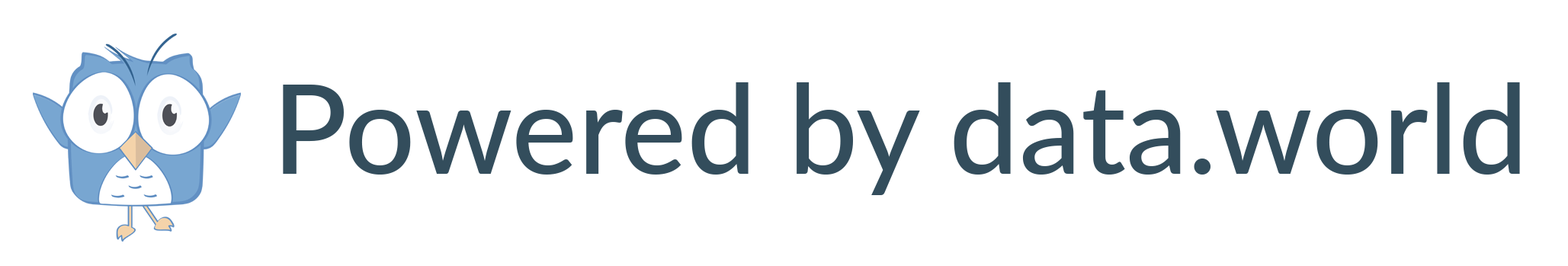
<style>
.page{position:relative;width:1568px;height:266px;background:#ffffff}
.page>*{position:absolute;margin:0}
.t1{font:124.5px "Lato-Medium";color:#334d5c}
</style>
<div class="page">
<p class="t1" style="left:283px;top:82px;width:1237px;height:113px">Powered by data.world</p>
</div>
